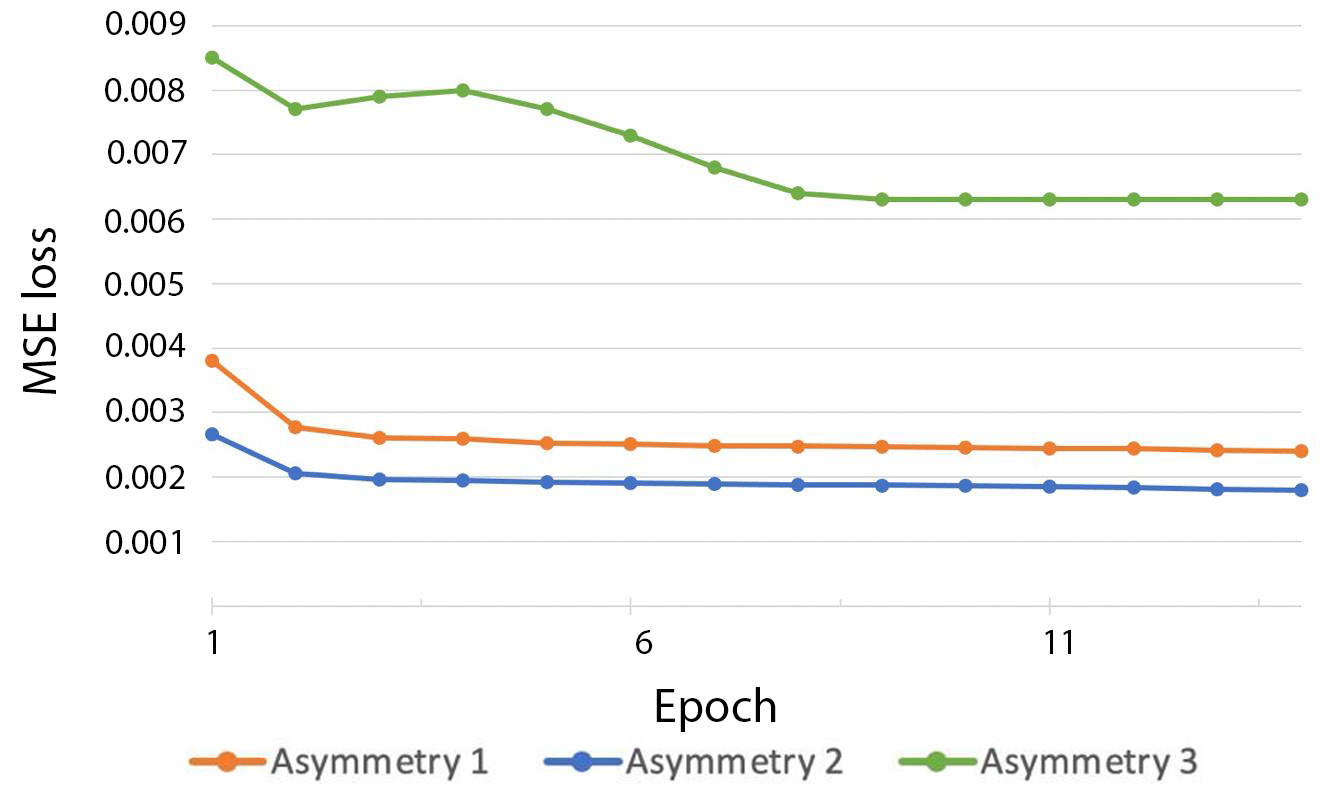
<style>
.page{position:relative;width:1336px;height:796px;background:#ffffff}
.page>*{position:absolute;margin:0}
.t1{font:36px "MyriadPro-Regular";color:#000000}
.t2{font:48px "MyriadPro-Regular";color:#000000}
</style>
<div class="page">
<p class="t1" style="left:106px;top:11px;width:80px;height:24px">0.009</p>
<p class="t1" style="left:105px;top:78px;width:80px;height:24px">0.008</p>
<p class="t1" style="left:108px;top:140px;width:79px;height:24px">0.007</p>
<p class="t1" style="left:105px;top:209px;width:80px;height:24px">0.006</p>
<p class="t2" style="left:21px;top:228px;width:35px;height:166px;rotate:-90deg">MSE loss</p>
<p class="t1" style="left:105px;top:272px;width:78px;height:24px">0.005</p>
<p class="t1" style="left:106px;top:333px;width:80px;height:24px">0.004</p>
<p class="t1" style="left:106px;top:398px;width:78px;height:24px">0.003</p>
<p class="t1" style="left:106px;top:465px;width:79px;height:24px">0.002</p>
<p class="t1" style="left:106px;top:530px;width:74px;height:24px">0.001</p>
<p class="t1" style="left:208px;top:630px;width:8px;height:24px">1</p>
<p class="t1" style="left:636px;top:630px;width:17px;height:24px">6</p>
<p class="t1" style="left:1045px;top:630px;width:26px;height:24px">11</p>
<p class="t2" style="left:656px;top:687px;width:120px;height:45px">Epoch</p>
</div>
